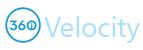
<style>
.page{position:relative;width:143px;height:50px;background:#ffffff}
.page>*{position:absolute;margin:0}
.t1{font:28px "SegoeUI";color:#a8e0fa}
</style>
<div class="page">
<p class="t1" style="left:44px;top:16px;width:96px;height:27px">Velocity</p>
</div>
